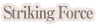
<style>
.page{position:relative;width:96px;height:26px;background:#ffffff}
.page>*{position:absolute;margin:0}
.t1{font:17px "RyuminPro-ExBold";letter-spacing:-0.08em;color:#817067;scale:0.9 1}
</style>
<div class="page">
<p class="t1" style="left:3px;top:5px;width:90px;height:17px">Striking Force</p>
</div>
